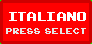
<style>
.page{position:relative;width:92px;height:44px;background:#ff0000}
.page>*{position:absolute;margin:0}
.t1{font:18px "ArcadeClassic";color:#ffffff}
.t2{font:12.4px "ArcadeClassic";color:#e6e6e6;scale:0.97 1}
</style>
<div class="page">
<p class="t1" style="left:9px;top:12px;width:77px;height:9px">ITALIANO</p>
<p class="t2" style="left:6px;top:28px;width:80px;height:6px">press  select</p>
</div>
